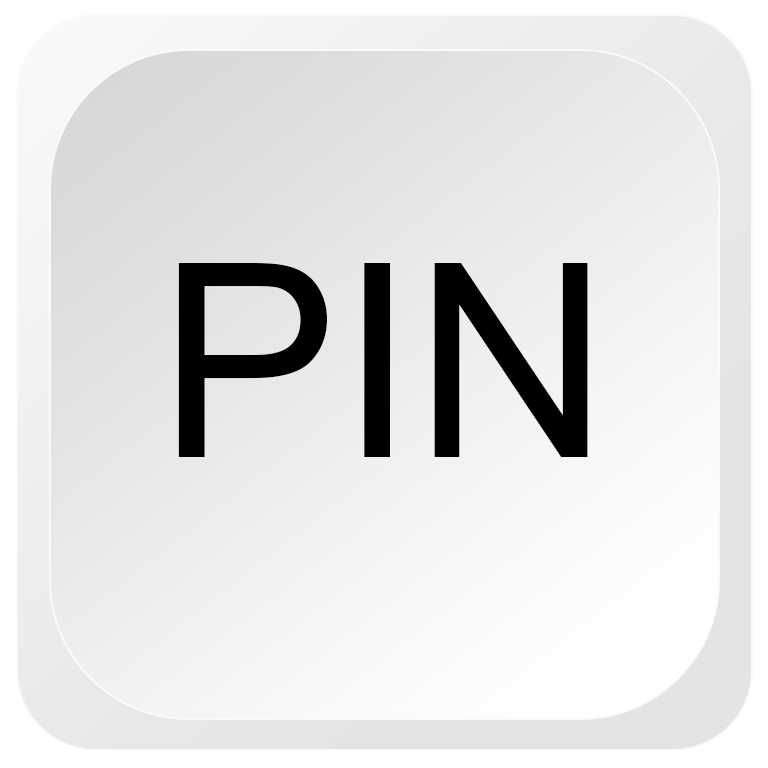
<style>
.page{position:relative;width:768px;height:768px}
.page>*{position:absolute;margin:0}
.t1{font:271px "ArialMT";color:#000000}
</style>
<div class="page">
<p class="t1" style="left:178px;top:263px;width:410px;height:194px">PIN</p>
</div>
